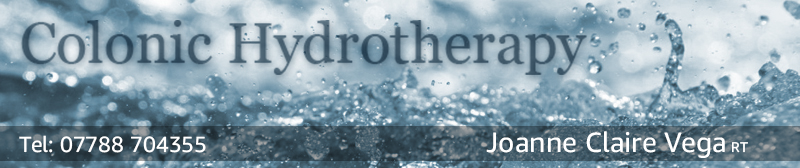
<style>
.page{position:relative;width:800px;height:168px}
.page>*{position:absolute;margin:0}
.t1{font:22px "AmazonEmberDisplay-Regular";color:#ffffff}
.t2{font:28px "AmazonEmberDisplay-Regular";color:#ffffff}
.t3{font:14px "AmazonEmberDisplay-Regular";color:#ffffff}
</style>
<div class="page">
<p class="t1" style="left:19px;top:135px;width:187px;height:18px">Tel: 07788 704355</p>
<p class="t2" style="left:486px;top:131px;width:239px;height:27px">Joanne Claire Vega</p>
<p class="t3" style="left:732px;top:142px;width:16px;height:11px">RT</p>
</div>
